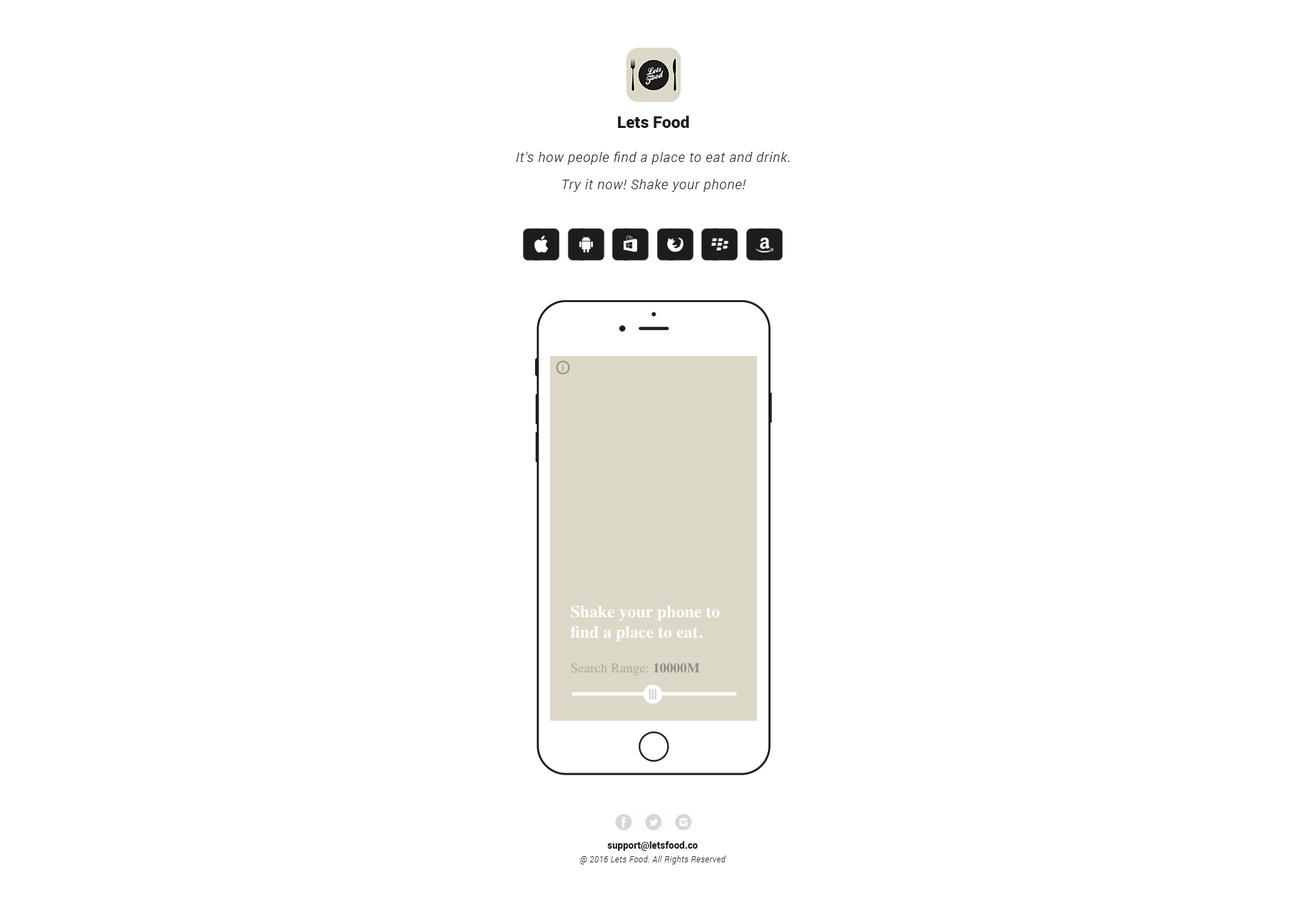
<style>
.page{position:relative;width:1307px;height:912px;background:#ffffff}
.page>*{position:absolute;margin:0}
.t1{font:16.3px "Roboto-Black";color:#1d1d1b}
.t2{font:13.6px/27.2px "Roboto-LightItalic";letter-spacing:0.05em;color:#1d1d1b}
.t3{font:8.2px/13.6px "Roboto-LightItalic";letter-spacing:0.05em;color:#1d1d1b}
.t4{font:9.5px/13.6px "Roboto-Black";color:#1d1d1b}
</style>
<div class="page">
<p class="t1" style="left:617px;top:116px;width:72px;height:12px">Lets Food</p>
<p class="t2" style="left:516px;top:152px;width:274px;height:40px;text-align:center">It's how people find a place to eat and drink.<br>Try it now! Shake your phone!</p>
<p class="t3" style="left:580px;top:841px;width:146px;height:24px;text-align:center"><span class="t4">support@letsfood.co<br></span>@ 2016 Lets Food. All Rights Reserved</p>
</div>
